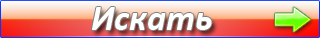
<style>
.page{position:relative;width:320px;height:38px}
.page>*{position:absolute;margin:0}
.t1{font:36px "Calibri-BoldItalic";color:#feffff}
</style>
<div class="page">
<p class="t1" style="left:92px;top:7px;width:120px;height:23px">Искать</p>
</div>
